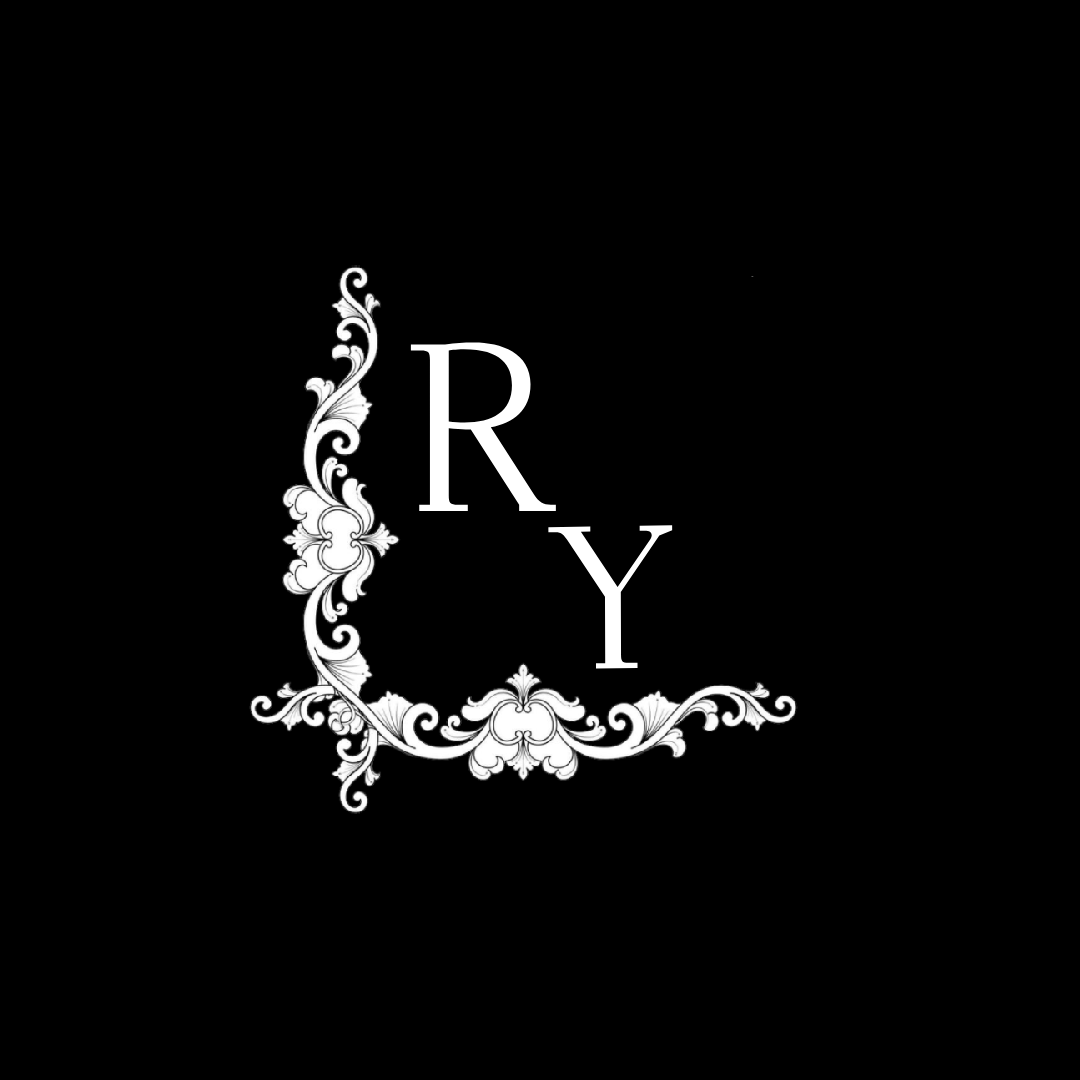
<style>
.page{position:relative;width:1080px;height:1080px;background:#000000}
.page>*{position:absolute;margin:0}
.t1{font:237.1px "Dihjauti-Regular";color:#ffffff}
.t2{font:202.4px "DihjautiS-Regular";color:#ffffff}
</style>
<div class="page">
<p class="t1" style="left:410px;top:342px;width:146px;height:169px">R</p>
<p class="t2" style="left:548px;top:525px;width:125px;height:144px;rotate:-1deg">Y</p>
</div>
